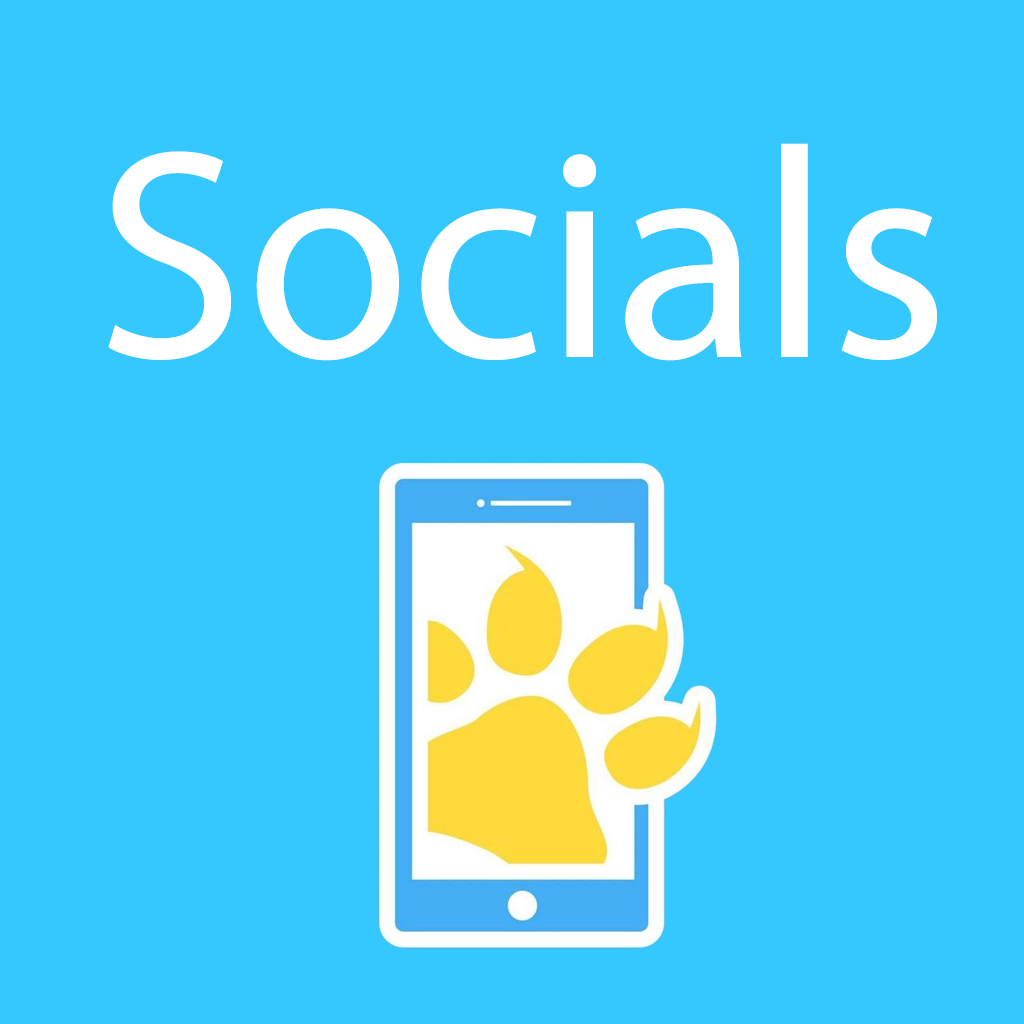
<style>
.page{position:relative;width:1024px;height:1024px;background:#35c8ff}
.page>*{position:absolute;margin:0}
.t1{font:300px "MyriadPro-Regular";color:#ffffff}
</style>
<div class="page">
<p class="t1" style="left:108px;top:143px;width:829px;height:218px">Socials</p>
</div>
